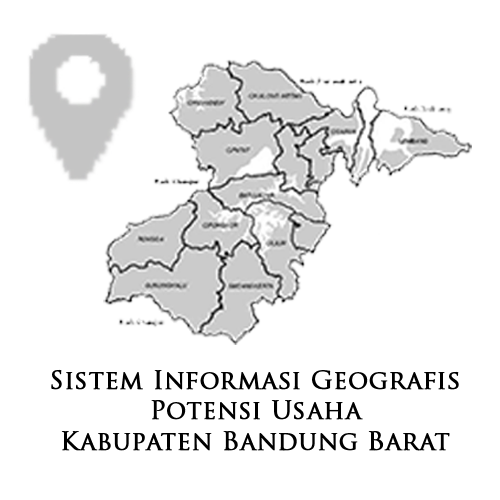
<style>
.page{position:relative;width:500px;height:500px;background:#ffffff}
.page>*{position:absolute;margin:0}
.t1{font:25.2px "TrajanPro-Regular";color:#000000;font-weight:bold}
</style>
<div class="page">
<p class="t1" style="left:51px;top:369px;width:408px;height:82px;text-align:center">Sistem Informasi Geografis<br>Potensi Usaha<br>Kabupaten Bandung Barat</p>
</div>
